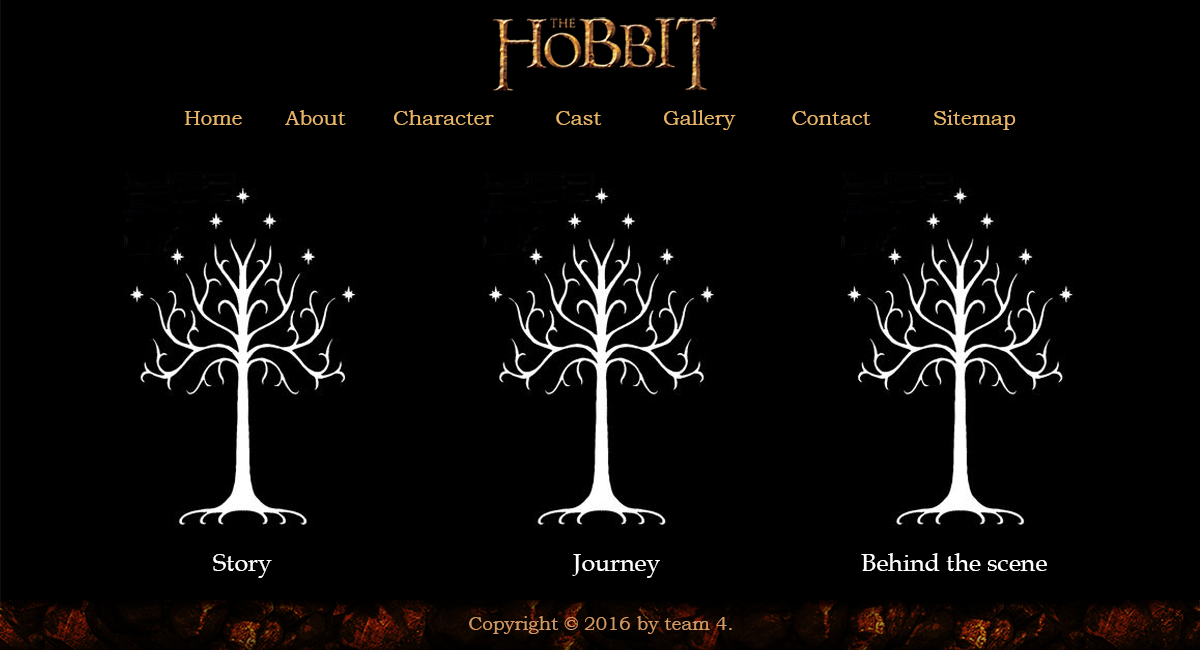
<style>
.page{position:relative;width:1200px;height:650px;background:#000000}
.page>*{position:absolute;margin:0}
.t1{font:20.6px "BookmanOldStyle";color:#e9b566}
.t2{font:12px/121.5px "BookAntiqua";color:#ffffff}
</style>
<div class="page">
<p class="t1" style="left:184px;top:110px;width:832px;height:20px">Home   About   Character   Cast   Gallery   Contact   Sitemap</p>
<p class="t2" style="left:213px;top:553px;width:834px;height:25px">Story         Journey           Behind the scene</p>
</div>
